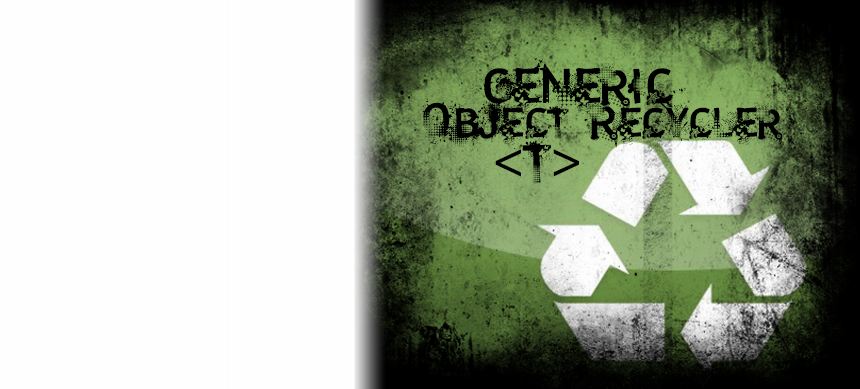
<style>
.page{position:relative;width:860px;height:389px;background:#fefefe}
.page>*{position:absolute;margin:0}
.t1{font:58px "trashco";color:#000000}
.t2{font:49px "trashco";color:#000000}
.t3{font:58px "AmericanTypewriter";color:#000000}
</style>
<div class="page">
<p class="t1" style="left:472px;top:57px;width:216px;height:57px">generic</p>
<p class="t2" style="left:411px;top:95px;width:372px;height:53px">Object Recycler</p>
<p class="t3" style="left:495px;top:149px;width:84px;height:28px">&lt;  &gt;</p>
<p class="t1" style="left:513px;top:139px;width:42px;height:45px">T</p>
</div>
